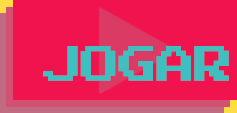
<style>
.page{position:relative;width:237px;height:113px;background:#f0134d}
.page>*{position:absolute;margin:0}
.t1{font:69.4px "ArcadeClassic";color:#40bfc1}
</style>
<div class="page">
<p class="t1" style="left:43px;top:46px;width:186px;height:35px">JOGAR</p>
</div>
